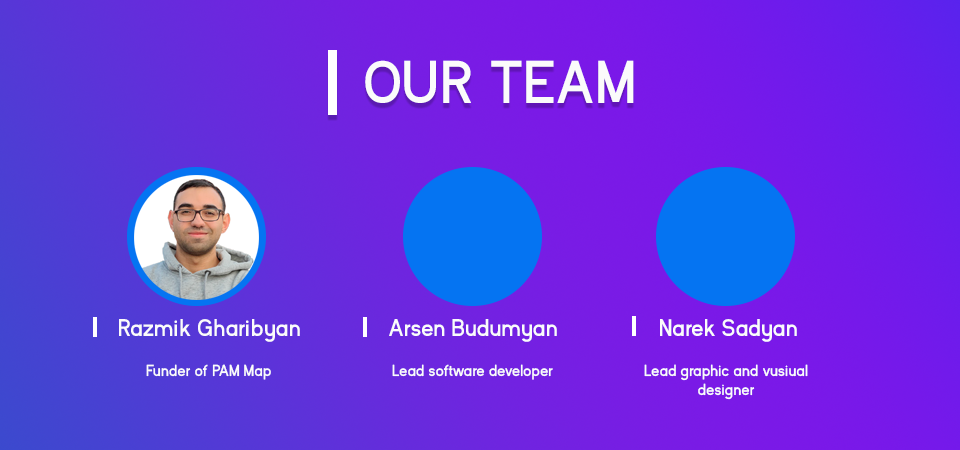
<style>
.page{position:relative;width:960px;height:450px}
.page>*{position:absolute;margin:0}
.t1{font:60px "KayakSans-Bold";color:#fbfbfb}
.t2{font:24px "KayakSans-Bold";color:#fbfbfb}
.t3{font:16px "KayakSans-Bold";color:#fbfbfb}
</style>
<div class="page">
<p class="t1" style="left:365px;top:60px;width:269px;height:43px">OUR TEAM</p>
<p class="t2" style="left:119px;top:319px;width:181px;height:23px">Razmik Gharibyan</p>
<p class="t2" style="left:389px;top:319px;width:168px;height:23px">Arsen Budumyan</p>
<p class="t2" style="left:660px;top:319px;width:137px;height:23px">Narek Sadyan</p>
<p class="t3" style="left:146px;top:364px;width:125px;height:16px">Funder of PAM Map</p>
<p class="t3" style="left:392px;top:364px;width:161px;height:16px">Lead software developer</p>
<p class="t3" style="left:644px;top:364px;width:164px;height:36px;text-align:center">Lead graphic and vusiual<br>designer</p>
</div>
